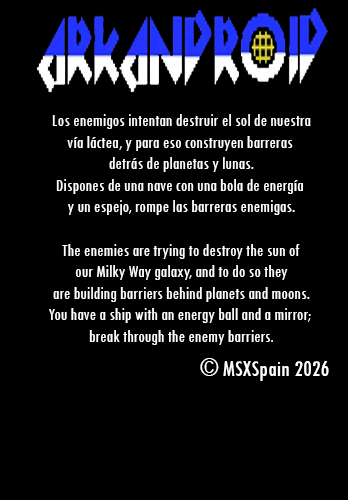
<style>
.page{position:relative;width:348px;height:500px;background:#000000}
.page>*{position:absolute;margin:0}
.t1{font:18px "TwCenMT-Condensed";color:#ffffff}
.t2{font:24px "TwCenMT-Condensed";color:#ffffff}
</style>
<div class="page">
<p class="t1" style="left:49px;top:114px;width:262px;height:231px;text-align:center">Los enemigos intentan destruir el sol de nuestra<br>vía láctea, y para eso construyen barreras <br>detrás de planetas y lunas.<br>Dispones de una nave con una bola de energía <br>y un espejo, rompe las barreras enemigas.<br><br>The enemies are trying to destroy the sun of<br>our Milky Way galaxy, and to do so they<br> are building barriers behind planets and moons. <br>You have a ship with an energy ball and a mirror; <br>break through the enemy barriers.</p>
<p class="t2" style="left:200px;top:358px;width:129px;height:23px">© MSXSpain 2026</p>
</div>
